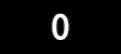
<style>
.page{position:relative;width:121px;height:54px;background:#000000}
.page>*{position:absolute;margin:0}
.t1{font:33px "WebPSD-18463539-0-Regular";color:#ffffff;font-weight:bold}
</style>
<div class="page">
<p class="t1" style="left:0px;top:0px;width:121px;height:54px">0</p>
</div>
